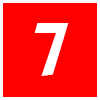
<style>
.page{position:relative;width:100px;height:100px;background:#ff0000}
.page>*{position:absolute;margin:0}
.t1{font:72px "ELEGANCE";color:#ffffff}
</style>
<div class="page">
<p class="t1" style="left:34px;top:23px;width:35px;height:53px">7</p>
</div>
